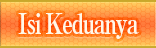
<style>
.page{position:relative;width:156px;height:48px}
.page>*{position:absolute;margin:0}
.t1{font:28px "RyuminPro-ExBold";letter-spacing:-0.08em;color:#fff8e7;scale:0.8 1}
</style>
<div class="page">
<p class="t1" style="left:18px;top:13px;width:121px;height:26px">Isi Keduanya</p>
</div>
